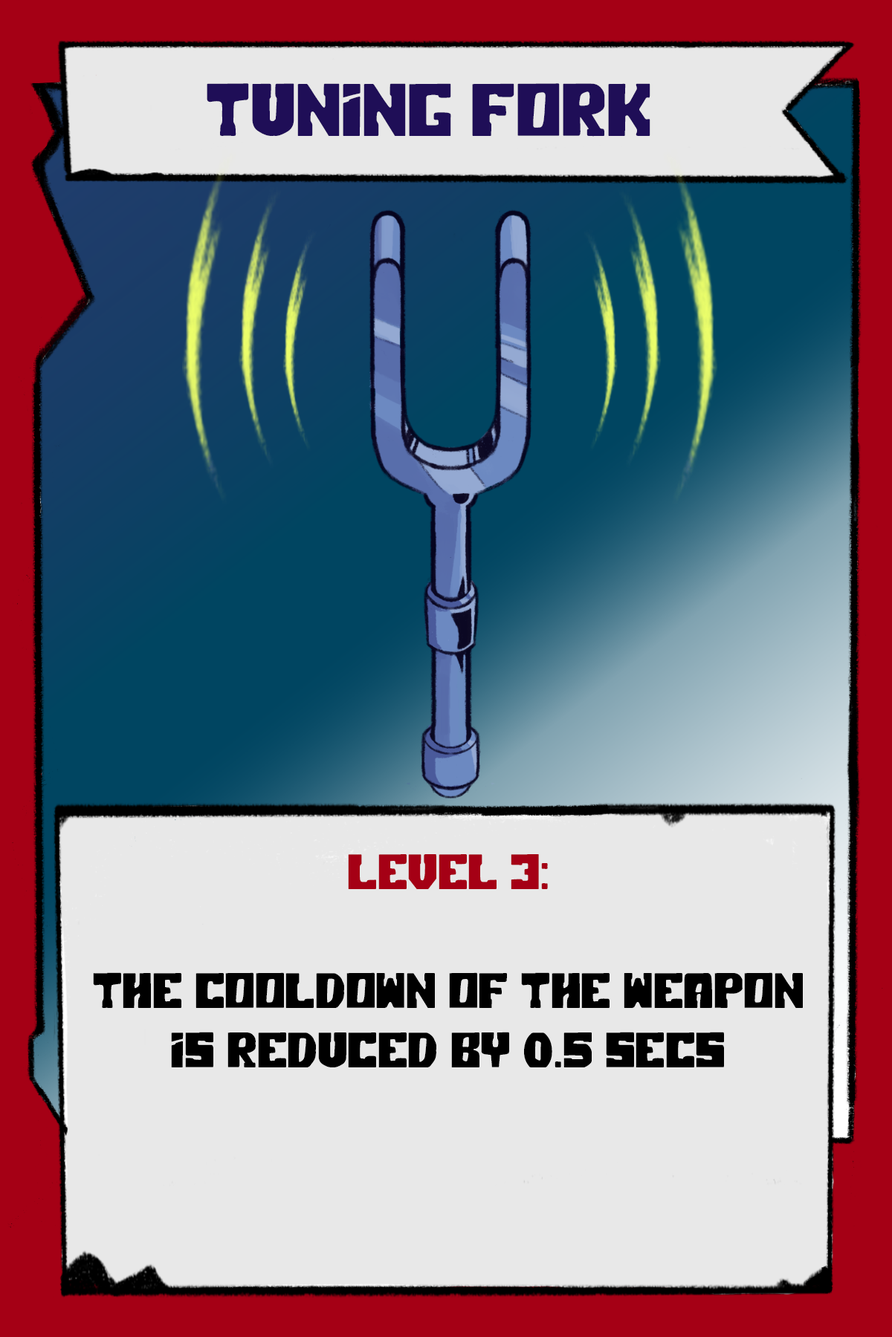
<style>
.page{position:relative;width:892px;height:1337px;background:#e8e8e8}
.page>*{position:absolute;margin:0}
.t1{font:74.3px "PolarPress";color:#1f0e57}
.t2{font:49.5px "PolarPress";color:#000000}
.t3{font:49.5px "PolarPress";color:#a50015}
</style>
<div class="page">
<p class="t1" style="left:207px;top:83px;width:443px;height:54px">TUNING FORK</p>
<p class="t2" style="left:93px;top:854px;width:709px;height:214px;text-align:center"><span class="t3">LEVEL 3:<br><br></span>The cooldown of the weapon is reduced by 0.5 secs</p>
</div>
